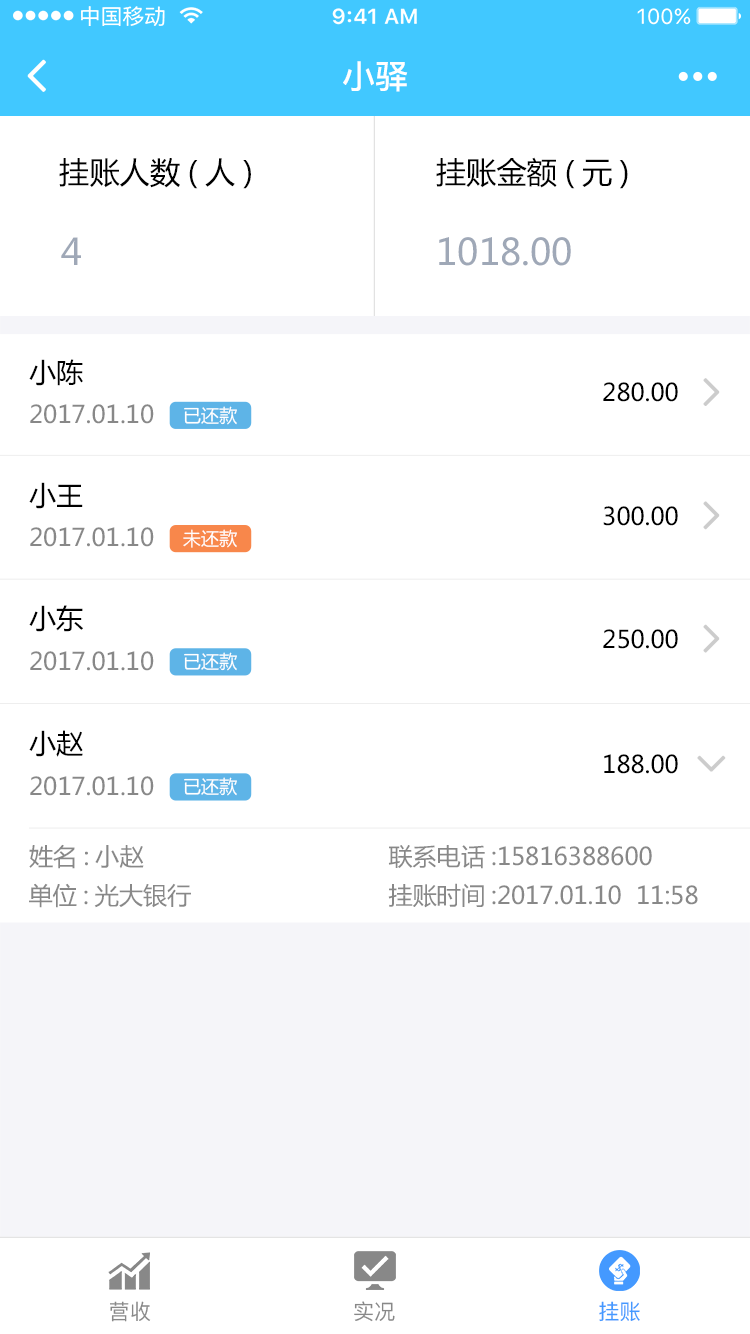
<style>
.page{position:relative;width:750px;height:1334px;background:#ffffff}
.page>*{position:absolute;margin:0}
.t1{font:33.2px "PingFang-SC-Bold";color:#ffffff}
.t2{font:30.2px "MicrosoftYaHei";color:#000000}
.t3{font:36.2px "MicrosoftYaHei";color:#9fa8b7}
.t4{font:27.2px "MicrosoftYaHei";color:#000000}
.t5{font:24.2px "MicrosoftYaHei";color:#000000}
.t6{font:24.2px "MicrosoftYaHei";color:#888888}
.t7{font:18.1px "MicrosoftYaHei";color:#ffffff}
.t8{font:21.1px "PingFang-SC-Medium";color:#888888}
.t9{font:21.1px "PingFang-SC-Medium";color:#4499ff}
</style>
<div class="page">
<p class="t1" style="left:343px;top:61px;width:65px;height:31px">小驿</p>
<p class="t2" style="left:59px;top:158px;width:192px;height:31px">挂账人数(人)</p>
<p class="t2" style="left:436px;top:157px;width:192px;height:32px">挂账金额(元)</p>
<p class="t3" style="left:61px;top:237px;width:20px;height:28px">4</p>
<p class="t3" style="left:439px;top:237px;width:132px;height:29px">1018.00</p>
<p class="t4" style="left:29px;top:359px;width:54px;height:27px">小陈</p>
<p class="t5" style="left:603px;top:382px;width:75px;height:20px">280.00</p>
<p class="t6" style="left:30px;top:404px;width:124px;height:20px">2017.01.10</p>
<p class="t7" style="left:184px;top:406px;width:53px;height:19px">已还款</p>
<p class="t4" style="left:29px;top:482px;width:54px;height:27px">小王</p>
<p class="t5" style="left:603px;top:506px;width:75px;height:20px">300.00</p>
<p class="t6" style="left:30px;top:527px;width:124px;height:20px">2017.01.10</p>
<p class="t7" style="left:183px;top:529px;width:54px;height:19px">未还款</p>
<p class="t4" style="left:29px;top:605px;width:54px;height:27px">小东</p>
<p class="t5" style="left:603px;top:629px;width:75px;height:20px">250.00</p>
<p class="t6" style="left:30px;top:651px;width:124px;height:20px">2017.01.10</p>
<p class="t7" style="left:184px;top:652px;width:53px;height:19px">已还款</p>
<p class="t4" style="left:29px;top:730px;width:54px;height:27px">小赵</p>
<p class="t5" style="left:604px;top:754px;width:74px;height:20px">188.00</p>
<p class="t6" style="left:30px;top:776px;width:124px;height:20px">2017.01.10</p>
<p class="t7" style="left:184px;top:777px;width:53px;height:19px">已还款</p>
<p class="t6" style="left:29px;top:844px;width:115px;height:25px">姓名:小赵</p>
<p class="t6" style="left:388px;top:845px;width:264px;height:24px">联系电话:15816388600</p>
<p class="t6" style="left:29px;top:883px;width:162px;height:25px">单位:光大银行</p>
<p class="t6" style="left:388px;top:883px;width:310px;height:25px">挂账时间:2017.01.10  11:58</p>
<p class="t8" style="left:110px;top:1301px;width:41px;height:21px">营收</p>
<p class="t8" style="left:354px;top:1301px;width:41px;height:21px">实况</p>
<p class="t9" style="left:599px;top:1301px;width:41px;height:21px">挂账</p>
</div>
